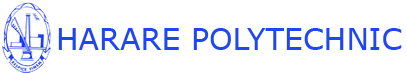
<style>
.page{position:relative;width:407px;height:73px;background:#ffffff}
.page>*{position:absolute;margin:0}
.t1{font:30px "Verdana";color:#1e46f5}
</style>
<div class="page">
<p class="t1" style="left:58px;top:28px;width:344px;height:22px">HARARE POLYTECHNIC</p>
</div>
